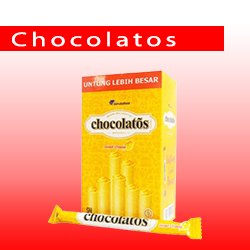
<style>
.page{position:relative;width:250px;height:250px}
.page>*{position:absolute;margin:0}
.t1{font:19.8px "MyriadPro-Regular";letter-spacing:0.15em;color:#ffffff;scale:1.39 1}
</style>
<div class="page">
<p class="t1" style="left:12px;top:31px;width:164px;height:16px">Chocolatos</p>
</div>
